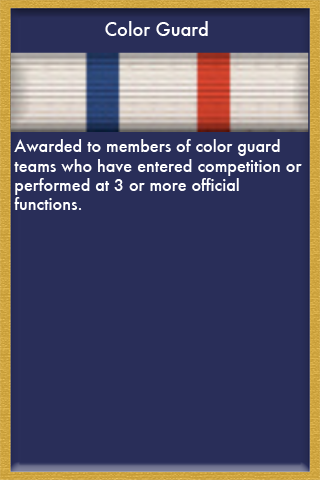
<style>
.page{position:relative;width:320px;height:480px;background:#292e59}
.page>*{position:absolute;margin:0}
.t1{font:18px "Futura-Medium";color:#ffffff}
.t2{font:16px "Futura-Medium";color:#ffffff}
</style>
<div class="page">
<p class="t1" style="left:105px;top:21px;width:103px;height:15px">Color Guard</p>
<p class="t2" style="left:14px;top:139px;width:288px;height:71px">Awarded to members of color guard <br>teams who have entered competition or <br>performed at 3 or more official <br>functions.</p>
</div>
